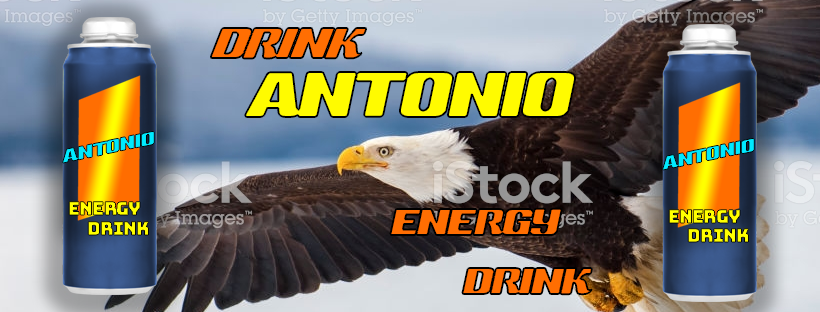
<style>
.page{position:relative;width:820px;height:312px}
.page>*{position:absolute;margin:0}
.t1{font:43.5px/59px "SneakersScript-Narrow";letter-spacing:-0.045em;color:#ff6e02;text-transform:uppercase}
.t2{font:50.5px/59px "SneakersScript-Narrow";letter-spacing:-0.045em;color:#ff6e02;text-transform:uppercase;font-style:italic}
.t3{font:74.5px/59px "SneakersScript-Narrow";letter-spacing:-0.045em;color:#fffb00;text-transform:uppercase}
.t4{font:21.6px "SneakersScript-Narrow";letter-spacing:-0.045em;color:#00eaff}
.t5{font:18.3px "Bungee-Regular";letter-spacing:-0.045em;color:#ffff00}
</style>
<div class="page">
<p class="t1" style="left:211px;top:28px;width:381px;height:267px"><span class="t2">Drink<br> </span><span class="t3">ANTONIO<br><br></span>     ENERGY<br>       DRINK</p>
<p class="t4" style="left:62px;top:131px;width:93px;height:32px;rotate:6deg">ANTONIO</p>
<p class="t4" style="left:662px;top:138px;width:93px;height:32px;rotate:6deg">ANTONIO</p>
<p class="t5" style="left:69px;top:201px;width:71px;height:14px">Energy</p>
<p class="t5" style="left:669px;top:209px;width:71px;height:14px">Energy</p>
<p class="t5" style="left:88px;top:221px;width:61px;height:14px">Drink</p>
<p class="t5" style="left:688px;top:228px;width:61px;height:14px">Drink</p>
</div>
